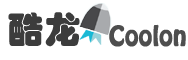
<style>
.page{position:relative;width:188px;height:60px;background:#ffffff}
.page>*{position:absolute;margin:0}
.t1{font:36px "STHupo";color:#313131}
.t2{font:24px "HoboStd";color:#434343;font-weight:bold}
</style>
<div class="page">
<p class="t1" style="left:8px;top:12px;width:35px;height:34px;opacity:0.95">酷</p>
<p class="t1" style="left:45px;top:12px;width:35px;height:35px;opacity:0.95">龙</p>
<p class="t2" style="left:109px;top:24px;width:77px;height:23px;opacity:0.94">Coolon</p>
</div>
